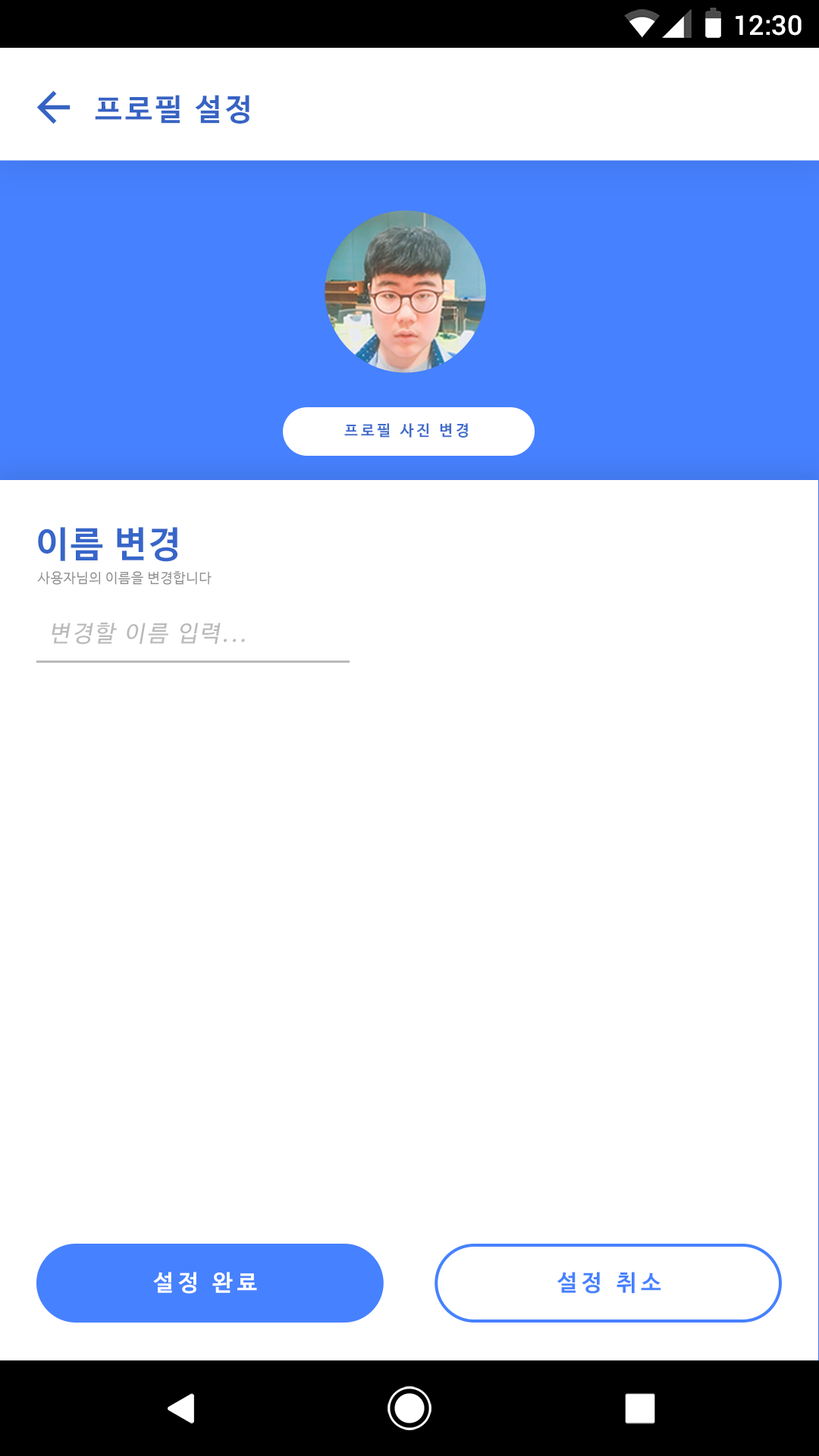
<style>
.page{position:relative;width:819px;height:1456px;background:#ffffff}
.page>*{position:absolute;margin:0}
.t1{font:27.3px "Roboto-Medium";color:#ffffff}
.t2{font:30.3px "NanumBarunGothicBold";letter-spacing:0.1em;color:#3663c3}
.t3{font:15.2px "NanumBarunGothicBold";letter-spacing:0.2em;color:#3f6bcb}
.t4{font:36.4px "NanumBarunGothicBold";letter-spacing:0.05em;color:#3766c9}
.t5{font:13.7px "NanumBarunGothic";letter-spacing:0.05em;color:#8d8d8d}
.t6{font:22.9px "NanumBarunGothic";letter-spacing:0.1em;color:#bababa;font-style:italic}
.t7{font:22.7px "NanumBarunGothicBold";letter-spacing:0.2em;color:#ffffff}
.t8{font:22.7px "NanumBarunGothicBold";letter-spacing:0.2em;color:#4681ff}
</style>
<div class="page">
<p class="t1" style="left:736px;top:15px;width:66px;height:21px">12:30</p>
<p class="t2" style="left:95px;top:95px;width:154px;height:29px">프로필 설정</p>
<p class="t3" style="left:344px;top:423px;width:124px;height:15px">프로필 사진 변경</p>
<p class="t4" style="left:38px;top:527px;width:139px;height:35px">이름 변경</p>
<p class="t5" style="left:37px;top:571px;width:175px;height:14px">사용자님의 이름을 변경합니다</p>
<p class="t6" style="left:52px;top:623px;width:193px;height:22px">변경할 이름 입력...</p>
<p class="t7" style="left:153px;top:1272px;width:104px;height:22px">설정 완료</p>
<p class="t8" style="left:557px;top:1272px;width:104px;height:22px">설정 취소</p>
</div>
